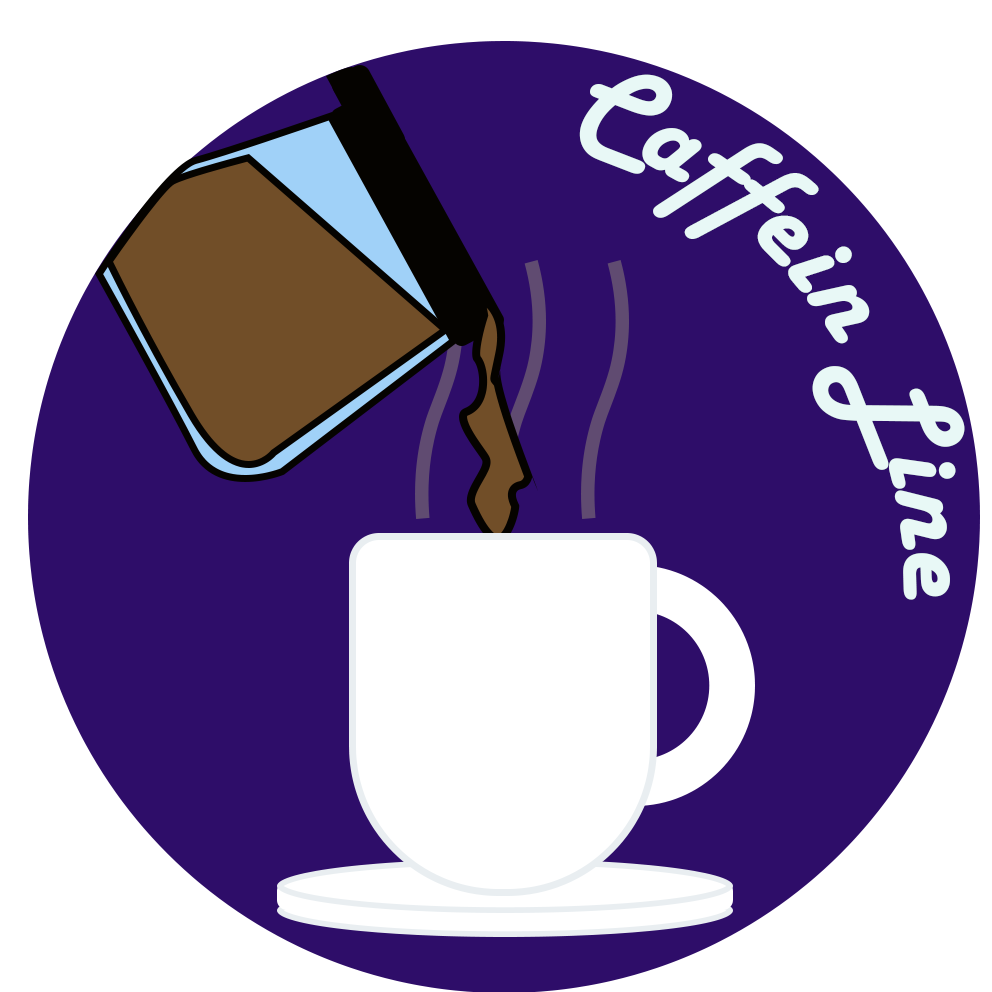
<style>
.page{position:relative;width:992px;height:992px;background:#2e0d69}
.page>*{position:absolute;margin:0}
.t1{font:122px "HarlowSolid";color:#e8f8f6}
</style>
<div class="page">
<p class="t1" style="left:579px;top:74px;width:386px;height:526px">Caffein Line</p>
</div>
